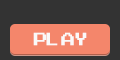
<style>
.page{position:relative;width:120px;height:60px;background:#333333}
.page>*{position:absolute;margin:0}
.t1{font:25px "ArcadeClassic";color:#faf9f9}
</style>
<div class="page">
<p class="t1" style="left:33px;top:32px;width:54px;height:14px">pLAY</p>
</div>
